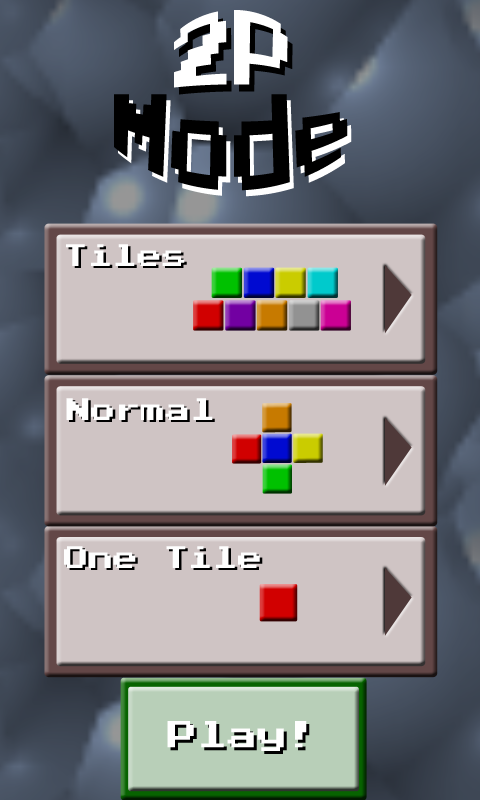
<style>
.page{position:relative;width:480px;height:800px;background:#cfc4c4}
.page>*{position:absolute;margin:0}
.t1{font:60px "PressStart2P";color:#ffffff}
.t2{font:60px "PressStart2P";color:#000000}
.t3{font:24.9px "PressStart2P";color:#ffffff}
.t4{font:24.9px "PressStart2P"}
.t5{font:24.9px "PressStart2P";color:#fefefe}
.t6{font:30px "PressStart2P";color:#ffffff}
.t7{font:30px "PressStart2P"}
</style>
<div class="page">
<p class="t1" style="left:174px;top:10px;width:114px;height:78px">2P</p>
<p class="t2" style="left:114px;top:94px;width:234px;height:97px">Mode</p>
<p class="t3" style="left:66px;top:244px;width:119px;height:22px">Tiles</p>
<p class="t4" style="left:68px;top:246px;width:119px;height:22px">Tiles</p>
<p class="t3" style="left:66px;top:398px;width:147px;height:22px">Normal</p>
<p class="t4" style="left:69px;top:400px;width:146px;height:22px">Normal</p>
<p class="t5" style="left:64px;top:546px;width:196px;height:22px">One Tile</p>
<p class="t4" style="left:66px;top:548px;width:197px;height:22px">One Tile</p>
<p class="t6" style="left:167px;top:721px;width:140px;height:30px">Play!</p>
<p class="t7" style="left:170px;top:724px;width:140px;height:30px">Play!</p>
</div>
